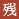
<style>
.page{position:relative;width:19px;height:19px;background:#a74430}
.page>*{position:absolute;margin:0}
.t1{font:14px "KozMinPr6N-Regular";color:#fffefe}
</style>
<div class="page">
<p class="t1" style="left:3px;top:2px;width:14px;height:14px">残</p>
</div>
